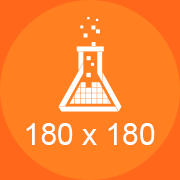
<style>
.page{position:relative;width:180px;height:180px;background:#ff7f21}
.page>*{position:absolute;margin:0}
.t1{font:30px "ArialMT";color:#ffffff}
</style>
<div class="page">
<p class="t1" style="left:26px;top:123px;width:129px;height:22px">180 x 180</p>
</div>
